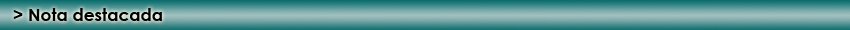
<style>
.page{position:relative;width:850px;height:30px}
.page>*{position:absolute;margin:0}
.t1{font:17px "CenturyGothic-Bold";color:#000000}
</style>
<div class="page">
<p class="t1" style="left:13px;top:8px;width:149px;height:13px">&gt; Nota destacada</p>
</div>
